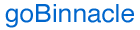
<style>
.page{position:relative;width:140px;height:30px;background:#ffffff}
.page>*{position:absolute;margin:0}
.t1{font:24.9px "Helvetica";color:#0066cc;scale:1.06 1}
</style>
<div class="page">
<p class="t1" style="left:5px;top:4px;width:129px;height:24px">goBinnacle</p>
</div>
